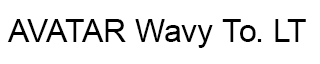
<style>
.page{position:relative;width:320px;height:64px;background:#ffffff}
.page>*{position:absolute;margin:0}
.t1{font:32px "ArialMT";color:#000000}
</style>
<div class="page">
<p class="t1" style="left:7px;top:19px;width:299px;height:29px">AVATAR Wavy To. LT</p>
</div>
